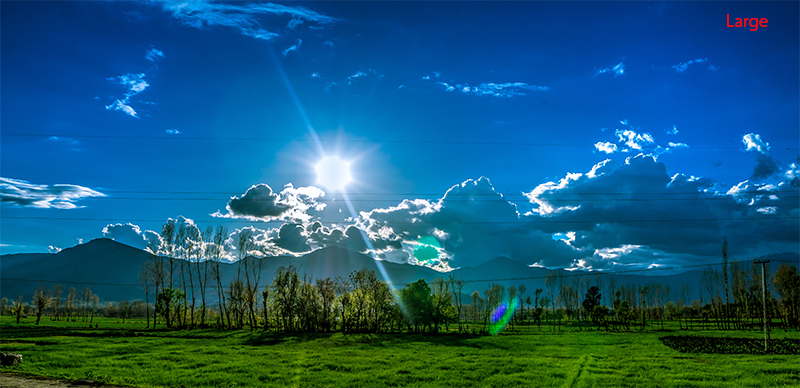
<style>
.page{position:relative;width:800px;height:388px}
.page>*{position:absolute;margin:0}
.t1{font:18px "MyriadPro-Regular";color:#f70404}
</style>
<div class="page">
<p class="t1" style="left:727px;top:14px;width:41px;height:17px">Large</p>
</div>
